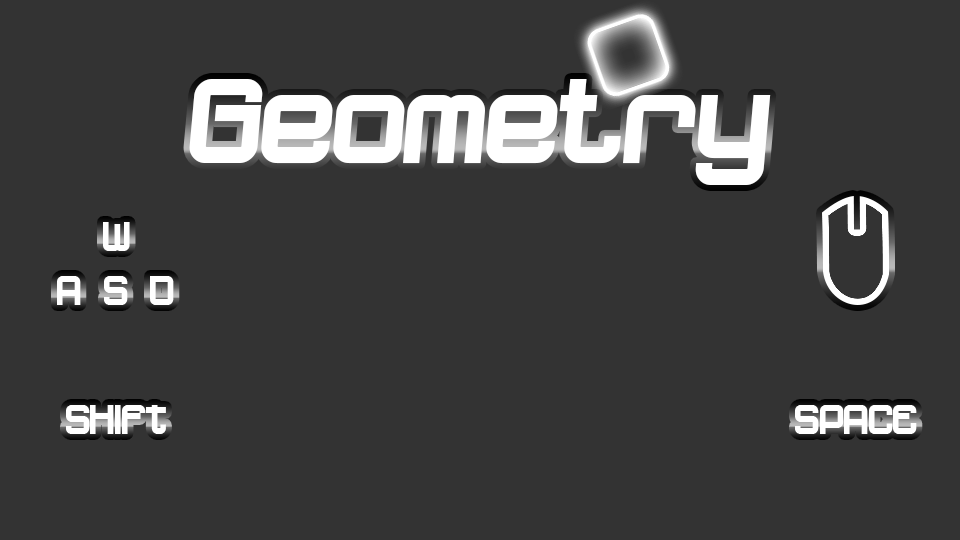
<style>
.page{position:relative;width:960px;height:540px;background:#333333}
.page>*{position:absolute;margin:0}
.t1{font:128.9px "Dopenakedfoulphatrelaxed";color:#ffffff}
.t2{font:44px "Dopenakedfoulphat";color:#ffffff}
</style>
<div class="page">
<p class="t1" style="left:189px;top:79px;width:582px;height:106px">Geometry</p>
<p class="t2" style="left:103px;top:222px;width:27px;height:29px">W</p>
<p class="t2" style="left:57px;top:276px;width:117px;height:29px">A S D</p>
<p class="t2" style="left:66px;top:405px;width:100px;height:29px">SHIFT</p>
<p class="t2" style="left:795px;top:405px;width:122px;height:29px">SPACE</p>
</div>
